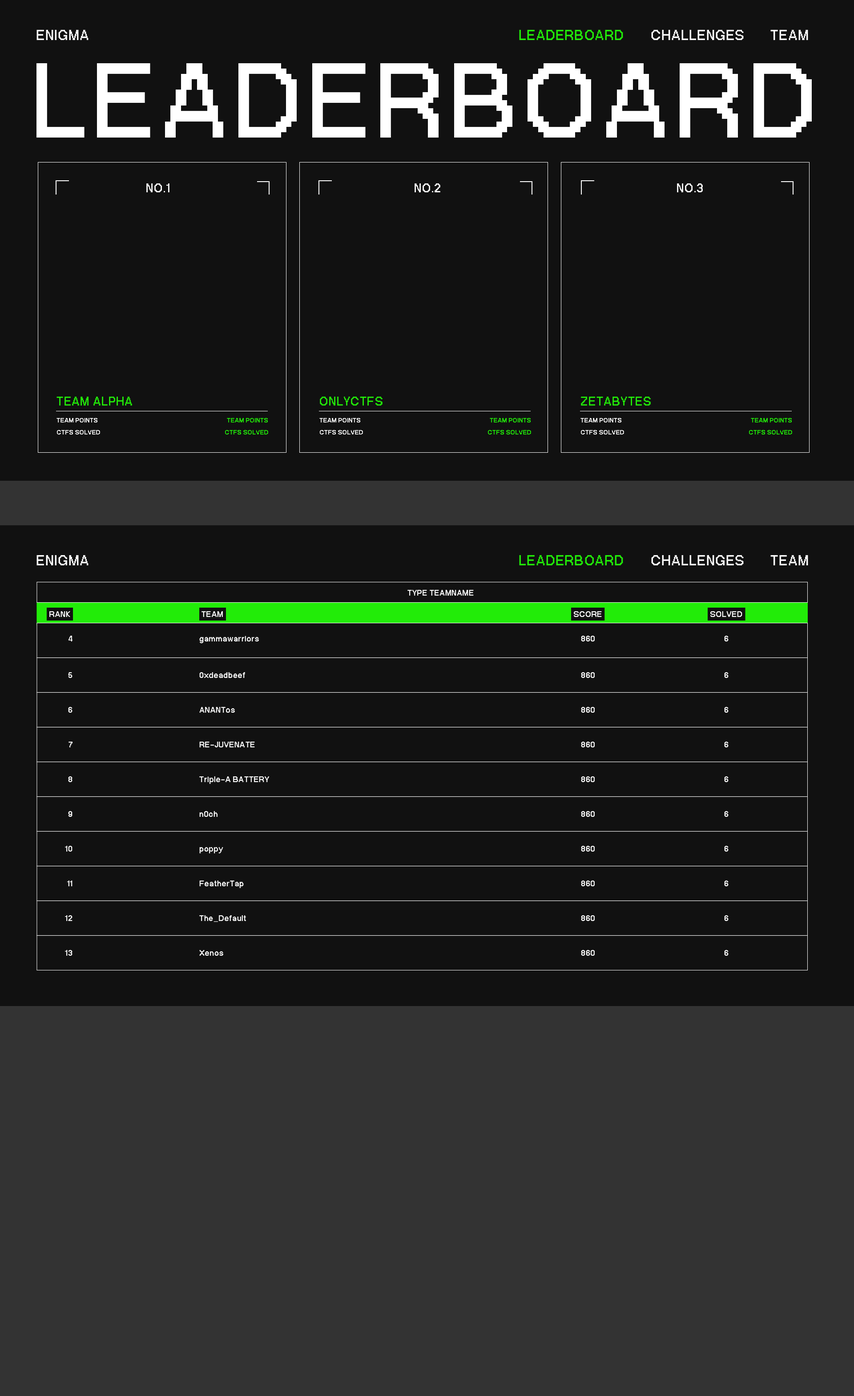
<style>
.page{position:relative;width:854px;height:1396px;background:#111111}
.page>*{position:absolute;margin:0}
.t1{font:19.9px "PPNeueBit-Bold";letter-spacing:0.03em;color:#ffffff}
.t2{font:19.9px "PPNeueBit-Bold";letter-spacing:0.03em;color:#22ec08}
.t3{font:148.9px "PPNeueBit-Bold";letter-spacing:0.03em;color:#ffffff}
.t4{font:17.2px "PPNeueBit-Bold";letter-spacing:0.03em;color:#ffffff}
.t5{font:17.2px "PPNeueBit-Bold";letter-spacing:0.03em;color:#22ec08}
.t6{font:8.9px "PPNeueBit-Bold";letter-spacing:0.03em;color:#ffffff}
.t7{font:8.9px "PPNeueBit-Bold";letter-spacing:0.03em;color:#22ec08}
.t8{font:11.4px "PPNeueBit-Bold";letter-spacing:0.03em;color:#ffffff}
</style>
<div class="page">
<p class="t1" style="left:36px;top:30px;width:53px;height:10px">ENIGMA</p>
<p class="t2" style="left:519px;top:30px;width:104px;height:10px">LEADERBOARD</p>
<p class="t1" style="left:652px;top:30px;width:92px;height:10px">CHALLENGES</p>
<p class="t1" style="left:771px;top:30px;width:38px;height:10px">TEAM</p>
<p class="t3" style="left:36px;top:63px;width:776px;height:75px">LEADERBOARD</p>
<p class="t4" style="left:146px;top:183px;width:24px;height:9px">NO.1</p>
<p class="t4" style="left:415px;top:183px;width:26px;height:9px">NO.2</p>
<p class="t4" style="left:677px;top:183px;width:26px;height:9px">NO.3</p>
<p class="t5" style="left:57px;top:397px;width:75px;height:8px">TEAM ALPHA</p>
<p class="t5" style="left:320px;top:397px;width:63px;height:8px">ONLYCTFS</p>
<p class="t5" style="left:581px;top:397px;width:70px;height:8px">ZETABYTES</p>
<p class="t6" style="left:57px;top:418px;width:40px;height:4px">TEAM POINTS</p>
<p class="t7" style="left:227px;top:418px;width:41px;height:4px">TEAM POINTS</p>
<p class="t6" style="left:320px;top:418px;width:40px;height:4px">TEAM POINTS</p>
<p class="t7" style="left:490px;top:418px;width:41px;height:4px">TEAM POINTS</p>
<p class="t6" style="left:581px;top:418px;width:41px;height:4px">TEAM POINTS</p>
<p class="t7" style="left:751px;top:418px;width:41px;height:4px">TEAM POINTS</p>
<p class="t6" style="left:57px;top:430px;width:43px;height:4px">CTFS SOLVED</p>
<p class="t7" style="left:225px;top:430px;width:43px;height:4px">CTFS SOLVED</p>
<p class="t6" style="left:320px;top:430px;width:43px;height:4px">CTFS SOLVED</p>
<p class="t7" style="left:488px;top:430px;width:43px;height:4px">CTFS SOLVED</p>
<p class="t6" style="left:581px;top:430px;width:43px;height:4px">CTFS SOLVED</p>
<p class="t7" style="left:749px;top:430px;width:44px;height:4px">CTFS SOLVED</p>
<p class="t1" style="left:36px;top:555px;width:53px;height:10px">ENIGMA</p>
<p class="t2" style="left:519px;top:555px;width:104px;height:10px">LEADERBOARD</p>
<p class="t1" style="left:652px;top:555px;width:92px;height:10px">CHALLENGES</p>
<p class="t1" style="left:771px;top:555px;width:38px;height:10px">TEAM</p>
<p class="t8" style="left:408px;top:590px;width:66px;height:5px">TYPE TEAMNAME</p>
<p class="t8" style="left:49px;top:611px;width:21px;height:6px">RANK</p>
<p class="t8" style="left:202px;top:611px;width:21px;height:6px">TEAM</p>
<p class="t8" style="left:574px;top:611px;width:28px;height:6px">SCORE</p>
<p class="t8" style="left:711px;top:611px;width:32px;height:6px">SOLVED</p>
<p class="t8" style="left:69px;top:635px;width:4px;height:6px">4</p>
<p class="t8" style="left:199px;top:635px;width:60px;height:8px">gammawarriors</p>
<p class="t8" style="left:581px;top:635px;width:14px;height:6px">860</p>
<p class="t8" style="left:724px;top:635px;width:5px;height:6px">6</p>
<p class="t8" style="left:68px;top:672px;width:5px;height:6px">5</p>
<p class="t8" style="left:199px;top:672px;width:46px;height:6px">0xdeadbeef</p>
<p class="t8" style="left:581px;top:672px;width:14px;height:6px">860</p>
<p class="t8" style="left:724px;top:672px;width:5px;height:6px">6</p>
<p class="t8" style="left:68px;top:707px;width:5px;height:5px">6</p>
<p class="t8" style="left:199px;top:707px;width:36px;height:5px">ANANTos</p>
<p class="t8" style="left:581px;top:707px;width:14px;height:5px">860</p>
<p class="t8" style="left:724px;top:707px;width:5px;height:5px">6</p>
<p class="t8" style="left:69px;top:741px;width:4px;height:6px">7</p>
<p class="t8" style="left:199px;top:741px;width:56px;height:6px">RE-JUVENATE</p>
<p class="t8" style="left:581px;top:741px;width:14px;height:6px">860</p>
<p class="t8" style="left:724px;top:741px;width:5px;height:6px">6</p>
<p class="t8" style="left:68px;top:776px;width:5px;height:6px">8</p>
<p class="t8" style="left:199px;top:776px;width:70px;height:8px">Triple-A BATTERY</p>
<p class="t8" style="left:581px;top:776px;width:14px;height:6px">860</p>
<p class="t8" style="left:724px;top:776px;width:5px;height:6px">6</p>
<p class="t8" style="left:68px;top:811px;width:5px;height:6px">9</p>
<p class="t8" style="left:199px;top:811px;width:19px;height:6px">n0ch</p>
<p class="t8" style="left:581px;top:811px;width:14px;height:6px">860</p>
<p class="t8" style="left:724px;top:811px;width:5px;height:6px">6</p>
<p class="t8" style="left:65px;top:846px;width:8px;height:5px">10</p>
<p class="t8" style="left:581px;top:846px;width:14px;height:5px">860</p>
<p class="t8" style="left:724px;top:846px;width:5px;height:5px">6</p>
<p class="t8" style="left:199px;top:847px;width:24px;height:6px">poppy</p>
<p class="t8" style="left:67px;top:880px;width:6px;height:6px">11</p>
<p class="t8" style="left:199px;top:880px;width:45px;height:8px">FeatherTap</p>
<p class="t8" style="left:581px;top:880px;width:14px;height:6px">860</p>
<p class="t8" style="left:724px;top:880px;width:5px;height:6px">6</p>
<p class="t8" style="left:65px;top:915px;width:8px;height:6px">12</p>
<p class="t8" style="left:199px;top:915px;width:47px;height:7px">The_Default</p>
<p class="t8" style="left:581px;top:915px;width:14px;height:6px">860</p>
<p class="t8" style="left:724px;top:915px;width:5px;height:6px">6</p>
<p class="t8" style="left:65px;top:950px;width:8px;height:5px">13</p>
<p class="t8" style="left:199px;top:950px;width:24px;height:5px">Xenos</p>
<p class="t8" style="left:581px;top:950px;width:14px;height:5px">860</p>
<p class="t8" style="left:724px;top:950px;width:5px;height:5px">6</p>
</div>
